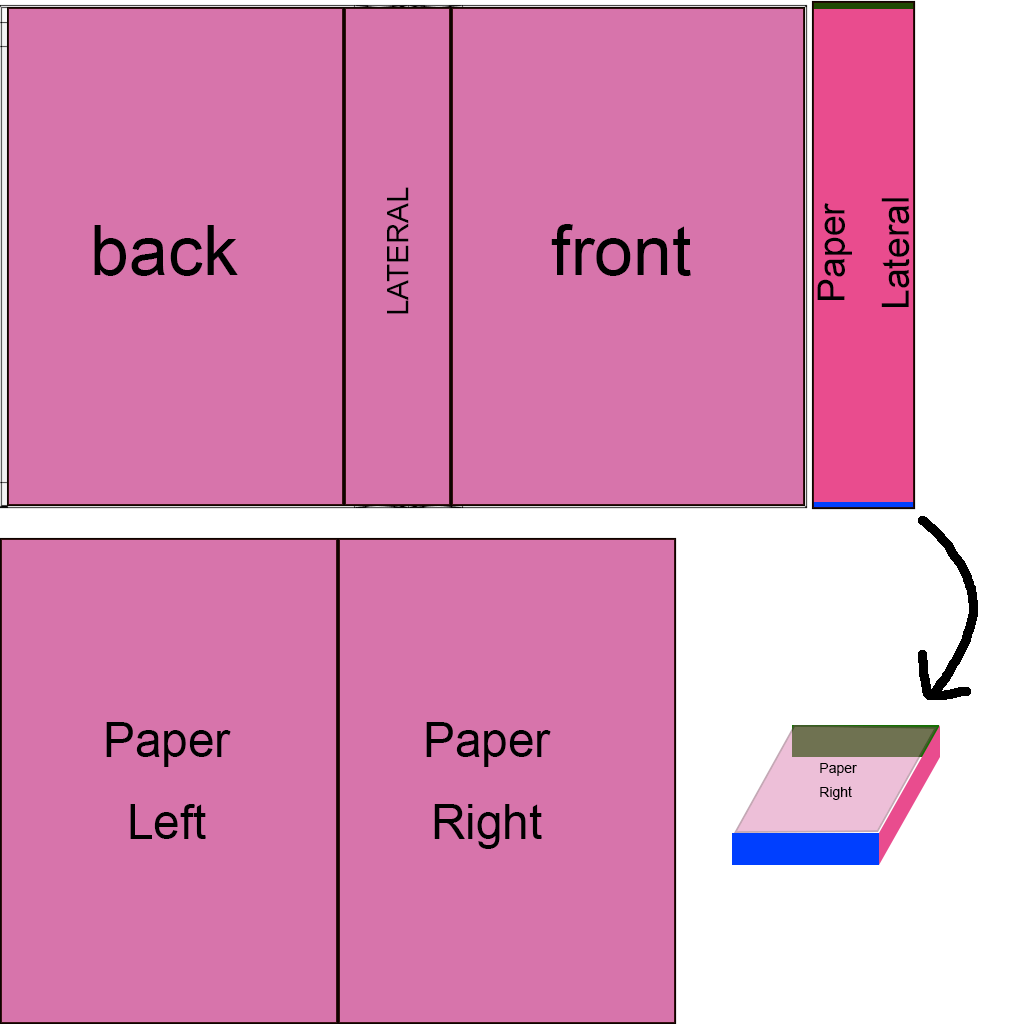
<style>
.page{position:relative;width:1024px;height:1024px;background:#d774ab}
.page>*{position:absolute;margin:0}
.t1{font:29.6px "ArialMT";color:#000000}
.t2{font:37.4px/64.2px "ArialMT";color:#000000}
.t3{font:70.1px "ArialMT";color:#000000}
.t4{font:47.6px/81.6px "ArialMT";color:#000000}
.t5{font:14px/24px "ArialMT";color:#000000}
</style>
<div class="page">
<p class="t1" style="left:387px;top:187px;width:22px;height:127px;rotate:-90deg">LATERAL</p>
<p class="t2" style="left:817px;top:198px;width:93px;height:109px;text-align:center;rotate:-90deg">Paper<br>Lateral</p>
<p class="t3" style="left:94px;top:225px;width:144px;height:51px">back</p>
<p class="t3" style="left:551px;top:224px;width:140px;height:52px">front</p>
<p class="t4" style="left:106px;top:722px;width:125px;height:117px;text-align:center">Paper<br>Left</p>
<p class="t4" style="left:426px;top:722px;width:125px;height:127px;text-align:center">Paper<br>Right</p>
<p class="t5" style="left:820px;top:763px;width:37px;height:37px">Paper<br>Right</p>
</div>
